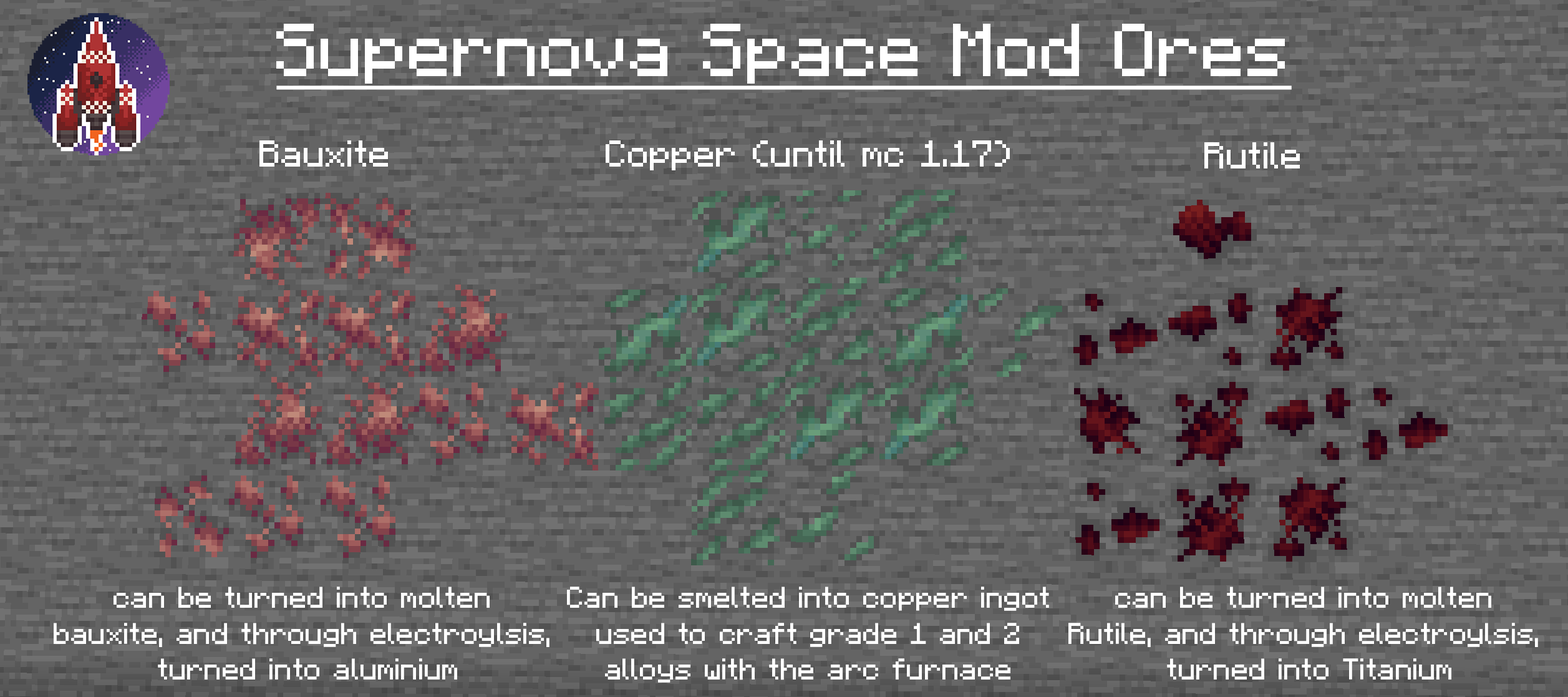
<style>
.page{position:relative;width:1568px;height:697px;background:#646464}
.page>*{position:absolute;margin:0}
.t1{font:74.8px "Minecraft-Regular";letter-spacing:-0.01em;color:#ffffff;text-decoration:underline}
.t2{font:37.4px "Minecraft-Regular";letter-spacing:-0.01em;color:#ffffff}
.t3{font:29.9px "Minecraft-Regular";letter-spacing:-0.01em;color:#ffffff}
</style>
<div class="page">
<p class="t1" style="left:276px;top:24px;width:1016px;height:66px">Supernova Space Mod Ores</p>
<p class="t2" style="left:259px;top:140px;width:129px;height:27px">Bauxite</p>
<p class="t2" style="left:606px;top:140px;width:404px;height:30px">Copper (until mc 1.17)</p>
<p class="t2" style="left:1204px;top:142px;width:96px;height:26px">Rutile</p>
<p class="t3" style="left:54px;top:586px;width:495px;height:93px;text-align:center">can be turned into molten <br>bauxite, and through electroylsis, <br>turned into aluminium</p>
<p class="t3" style="left:567px;top:586px;width:482px;height:96px;text-align:center">Can be smelted into copper ingot<br>used to craft grade 1 and 2<br>alloys with the arc furnace</p>
<p class="t3" style="left:1068px;top:586px;width:470px;height:93px;text-align:center">can be turned into molten <br>Rutile, and through electroylsis, <br>turned into Titanium</p>
</div>
